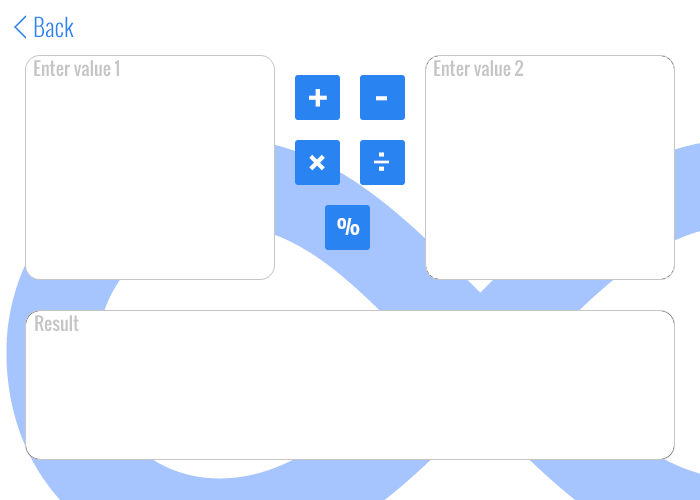
<style>
.page{position:relative;width:700px;height:500px;background:#ffffff}
.page>*{position:absolute;margin:0}
.t1{font:24px "Oswald-Light";color:#2984f2}
.t2{font:18px "Oswald-Regular";color:#c5c5c5}
.t3{font:72px "Oswald-Light";color:#ffffff}
.t4{font:45.5px "Oswald-Light";color:#ffffff;scale:1.19 1}
.t5{font:22.8px "Oswald-Regular";color:#ffffff;scale:1.06 1}
</style>
<div class="page">
<p class="t1" style="left:34px;top:16px;width:40px;height:22px">Back</p>
<p class="t2" style="left:34px;top:60px;width:85px;height:17px">Enter value 1</p>
<p class="t2" style="left:434px;top:60px;width:89px;height:17px">Enter value 2</p>
<p class="t3" style="left:309px;top:89px;width:18px;height:18px">+</p>
<p class="t3" style="left:376px;top:96px;width:11px;height:5px">-</p>
<p class="t3" style="left:309px;top:154px;width:16px;height:17px;rotate:45deg">+</p>
<p class="t4" style="left:374px;top:152px;width:15px;height:19px">÷</p>
<p class="t5" style="left:337px;top:218px;width:23px;height:17px">%</p>
<p class="t2" style="left:35px;top:315px;width:44px;height:17px">Result</p>
</div>
